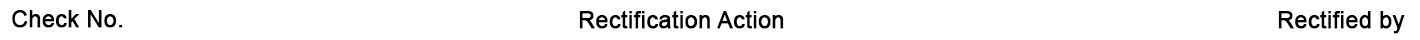
<style>
.page{position:relative;width:1420px;height:40px;background:#ffffff}
.page>*{position:absolute;margin:0}
.t1{font:23px "ArialMT";color:#000000;font-weight:bold}
</style>
<div class="page">
<p class="t1" style="left:12px;top:10px;width:110px;height:18px">Check No.</p>
<p class="t1" style="left:579px;top:11px;width:205px;height:18px">Rectification Action</p>
<p class="t1" style="left:1278px;top:11px;width:127px;height:23px">Rectified by</p>
</div>
